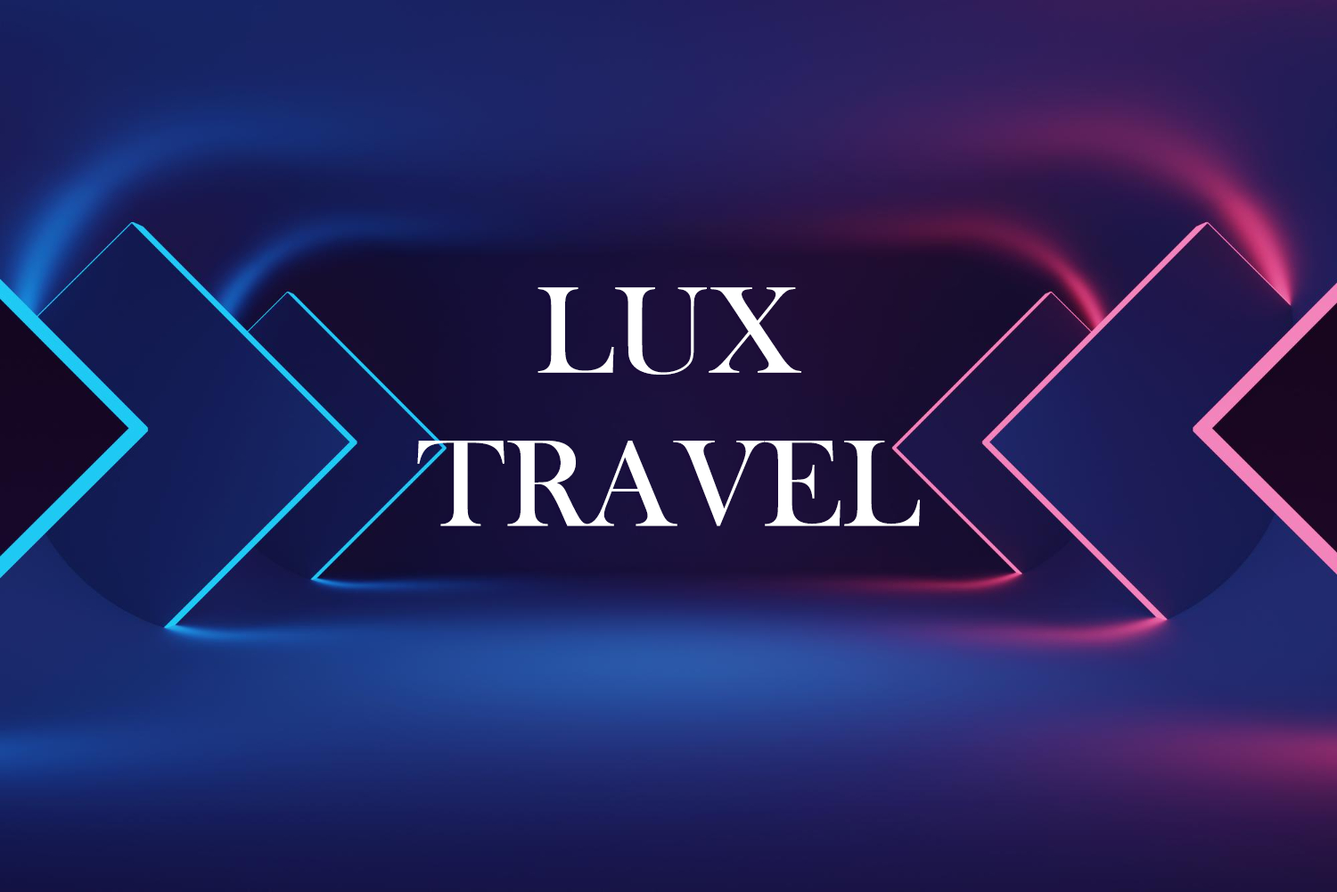
<style>
.page{position:relative;width:1337px;height:892px}
.page>*{position:absolute;margin:0}
.t1{font:127.5px "BaskOldFace";color:#ffffff;text-transform:uppercase}
</style>
<div class="page">
<p class="t1" style="left:417px;top:287px;width:503px;height:239px;text-align:center">LUX TRAVEL</p>
</div>
